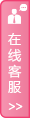
<style>
.page{position:relative;width:30px;height:118px}
.page>*{position:absolute;margin:0}
.t1{font:13.3px/16px "MicrosoftYaHei";color:#ffffff}
.t2{font:13.3px "MicrosoftYaHei";letter-spacing:-0.2em;color:#ffffff}
</style>
<div class="page">
<p class="t1" style="left:8px;top:33px;width:14px;height:60px">在<br>线客服</p>
<p class="t2" style="left:8px;top:103px;width:15px;height:7px;rotate:180deg">&lt;&lt;</p>
</div>
